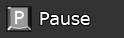
<style>
.page{position:relative;width:124px;height:38px;background:#333333}
.page>*{position:absolute;margin:0}
.t1{font:18px "Verdana";letter-spacing:-0.02em;color:#ffffff}
</style>
<div class="page">
<p class="t1" style="left:15px;top:11px;width:9px;height:13px">P</p>
<p class="t1" style="left:40px;top:12px;width:50px;height:13px">Pause</p>
</div>
